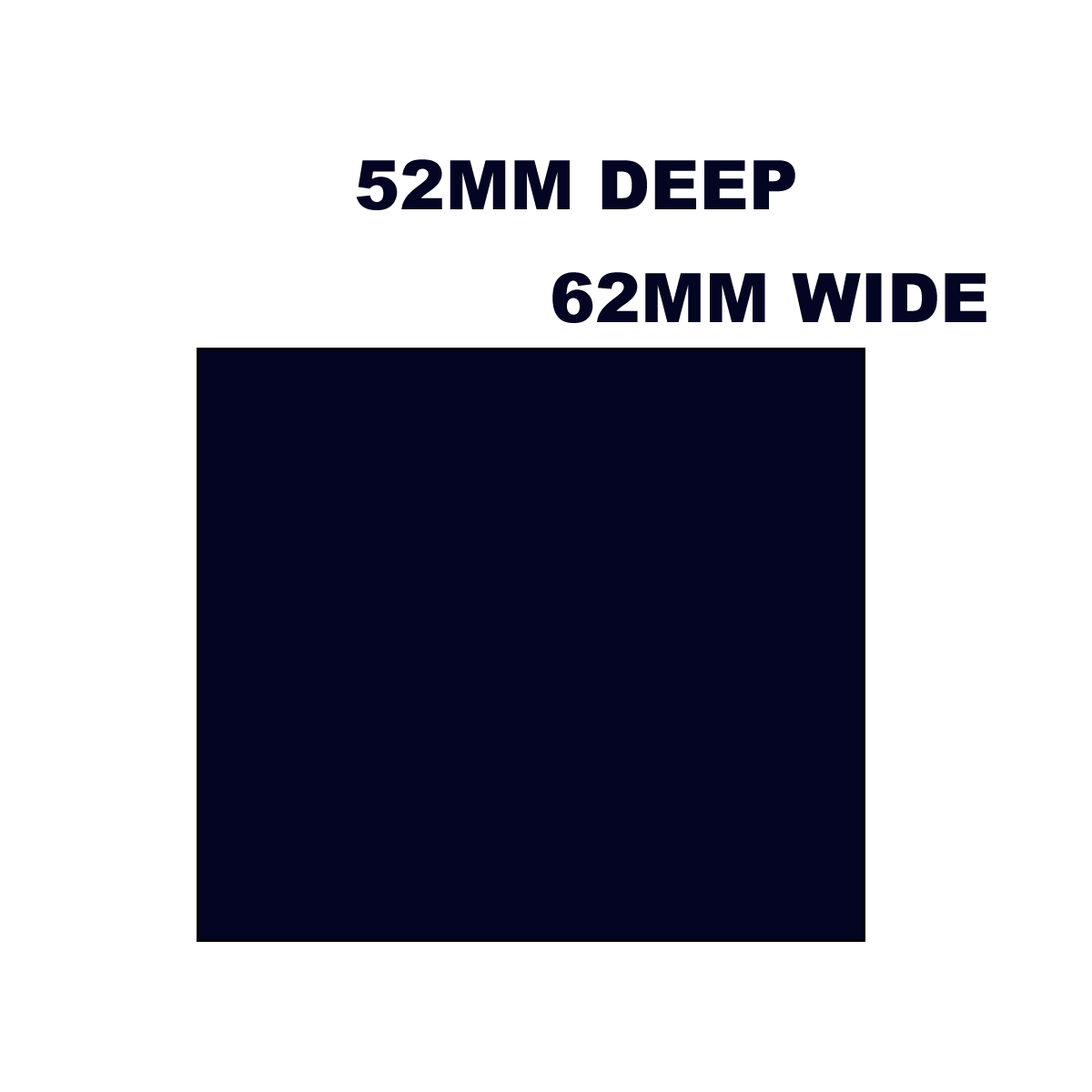
<style>
.page{position:relative;width:1092px;height:1092px;background:#ffffff}
.page>*{position:absolute;margin:0}
.t1{font:68.2px "Arial-Black";color:#040522;text-transform:uppercase}
</style>
<div class="page">
<p class="t1" style="left:356px;top:159px;width:439px;height:51px">52mm Deep</p>
<p class="t1" style="left:552px;top:272px;width:434px;height:51px">62mm wide</p>
</div>
